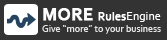
<style>
.page{position:relative;width:167px;height:40px;background:#333333}
.page>*{position:absolute;margin:0}
.t1{font:10px "Corbel";color:#e6e5e5}
.t2{font:18px "Corbel-Bold";color:#ffffff;font-weight:bold}
.t3{font:12px "Corbel";color:#ffffff;font-weight:bold}
.t4{font:12px "Corbel";color:#ffffff}
</style>
<div class="page">
<p class="t1" style="left:42px;top:8px;width:119px;height:26px"><span class="t2">MORE </span><span class="t3">Rules</span><span class="t4">Engine<br></span>Give “more” to your business</p>
</div>
